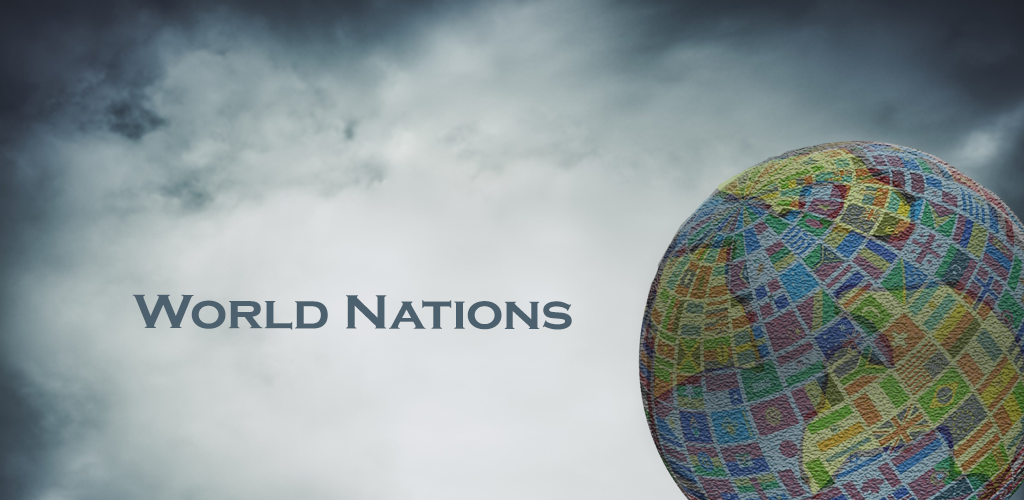
<style>
.page{position:relative;width:1024px;height:500px}
.page>*{position:absolute;margin:0}
.t1{font:50px "CopperplateGothic-Bold";color:#4d606e;scale:1.06 1}
</style>
<div class="page">
<p class="t1" style="left:132px;top:294px;width:440px;height:36px">World Nations</p>
</div>
